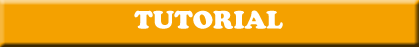
<style>
.page{position:relative;width:419px;height:47px;background:#f4a100}
.page>*{position:absolute;margin:0}
.t1{font:25px "CooperBlackStd";color:#ffffff}
</style>
<div class="page">
<p class="t1" style="left:134px;top:10px;width:149px;height:19px">TUTORIAL</p>
</div>
